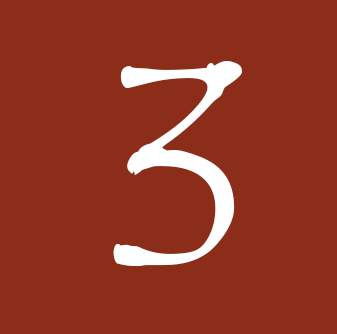
<style>
.page{position:relative;width:337px;height:334px;background:#8c2d19}
.page>*{position:absolute;margin:0}
.t1{font:300px "TempusSansITC";color:#ffffff}
</style>
<div class="page">
<p class="t1" style="left:113px;top:61px;width:129px;height:205px">3</p>
</div>
